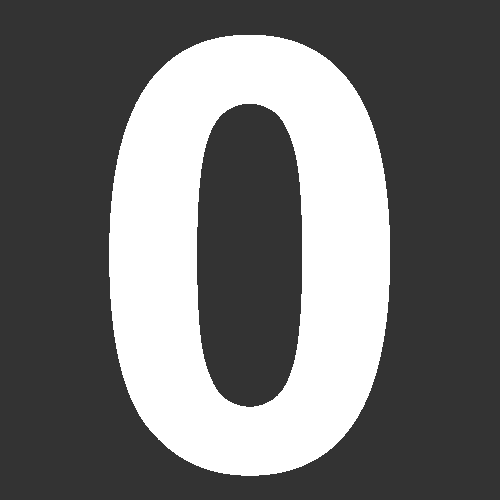
<style>
.page{position:relative;width:500px;height:500px;background:#333333}
.page>*{position:absolute;margin:0}
.t1{font:600px "Arial-BoldMT";color:#ffffff}
</style>
<div class="page">
<p class="t1" style="left:109px;top:35px;width:281px;height:441px">0</p>
</div>
